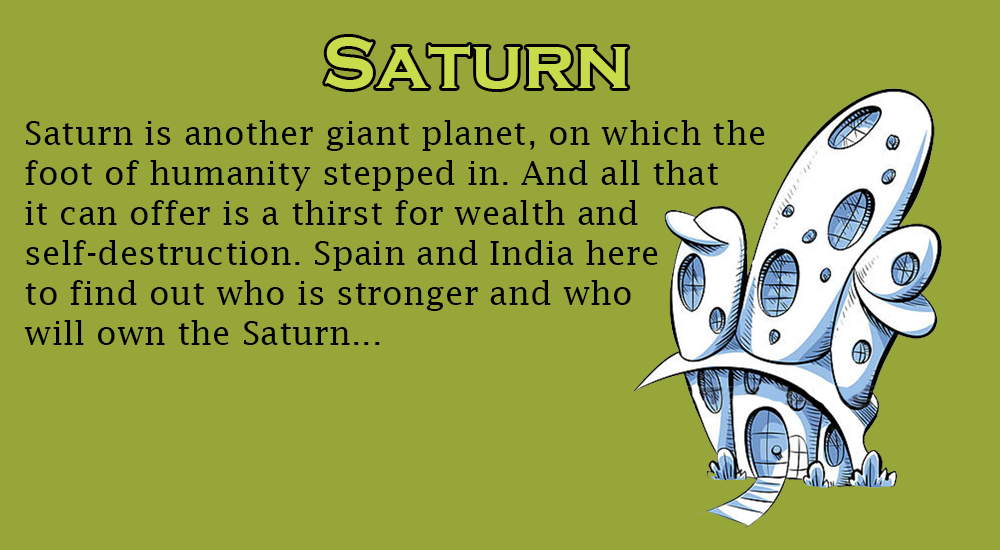
<style>
.page{position:relative;width:1000px;height:550px;background:#97a638}
.page>*{position:absolute;margin:0}
.t1{font:75px "CopperplateGothic-Bold";color:#c8db4b}
.t2{font:33.3px "LucidaFax";color:#000000}
</style>
<div class="page">
<p class="t1" style="left:325px;top:37px;width:303px;height:52px">Saturn</p>
<p class="t2" style="left:24px;top:120px;width:741px;height:225px">Saturn is another giant planet, on which the<br>foot of humanity stepped in. And all that<br>it can offer is a thirst for wealth and<br>self-destruction. Spain and India here<br>to find out who is stronger and who <br>will own the Saturn...</p>
</div>
